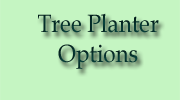
<style>
.page{position:relative;width:180px;height:100px;background:#c5f5c2}
.page>*{position:absolute;margin:0}
.t1{font:25px "BookAntiqua";color:#05312c;scale:0.9 1}
</style>
<div class="page">
<p class="t1" style="left:38px;top:13px;width:121px;height:56px;text-align:center">Tree Planter<br>Options</p>
</div>
